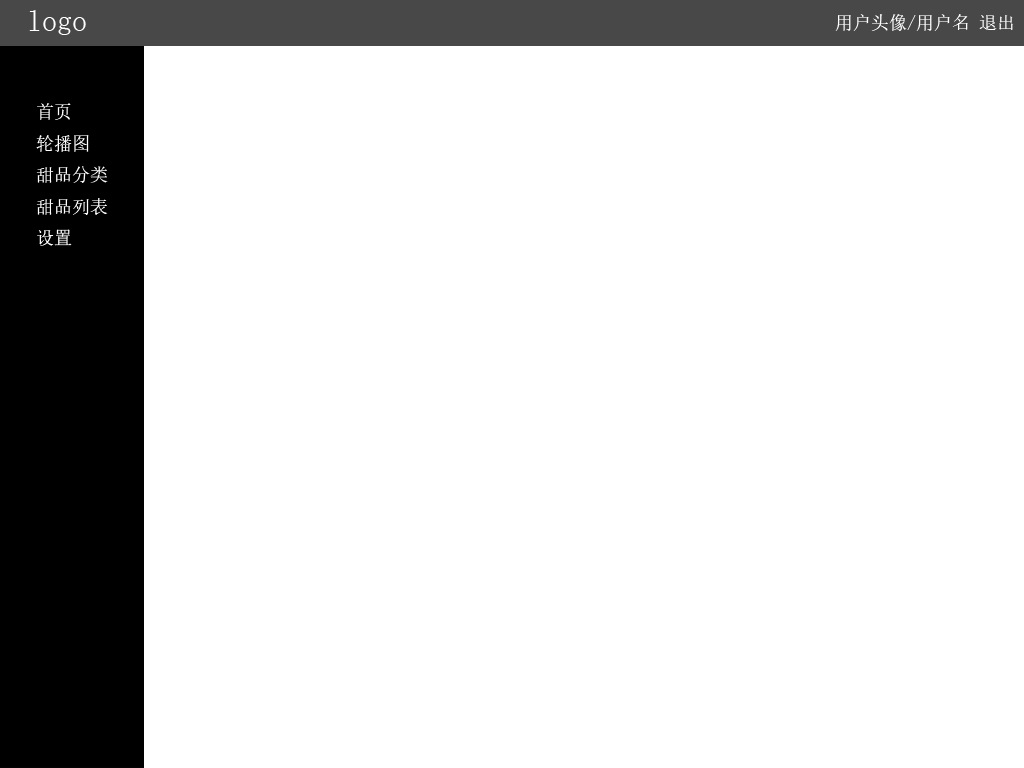
<style>
.page{position:relative;width:1024px;height:768px;background:#ffffff}
.page>*{position:absolute;margin:0}
.t1{font:30px "SimSun";color:#ffffff}
.t2{font:18px "SimSun";color:#ffffff}
</style>
<div class="page">
<p class="t1" style="left:29px;top:10px;width:57px;height:25px">logo</p>
<p class="t2" style="left:835px;top:14px;width:178px;height:17px">用户头像/用户名 退出</p>
<p class="t2" style="left:36px;top:103px;width:72px;height:143px">首页<br>轮播图<br>甜品分类<br>甜品列表<br>设置</p>
</div>
